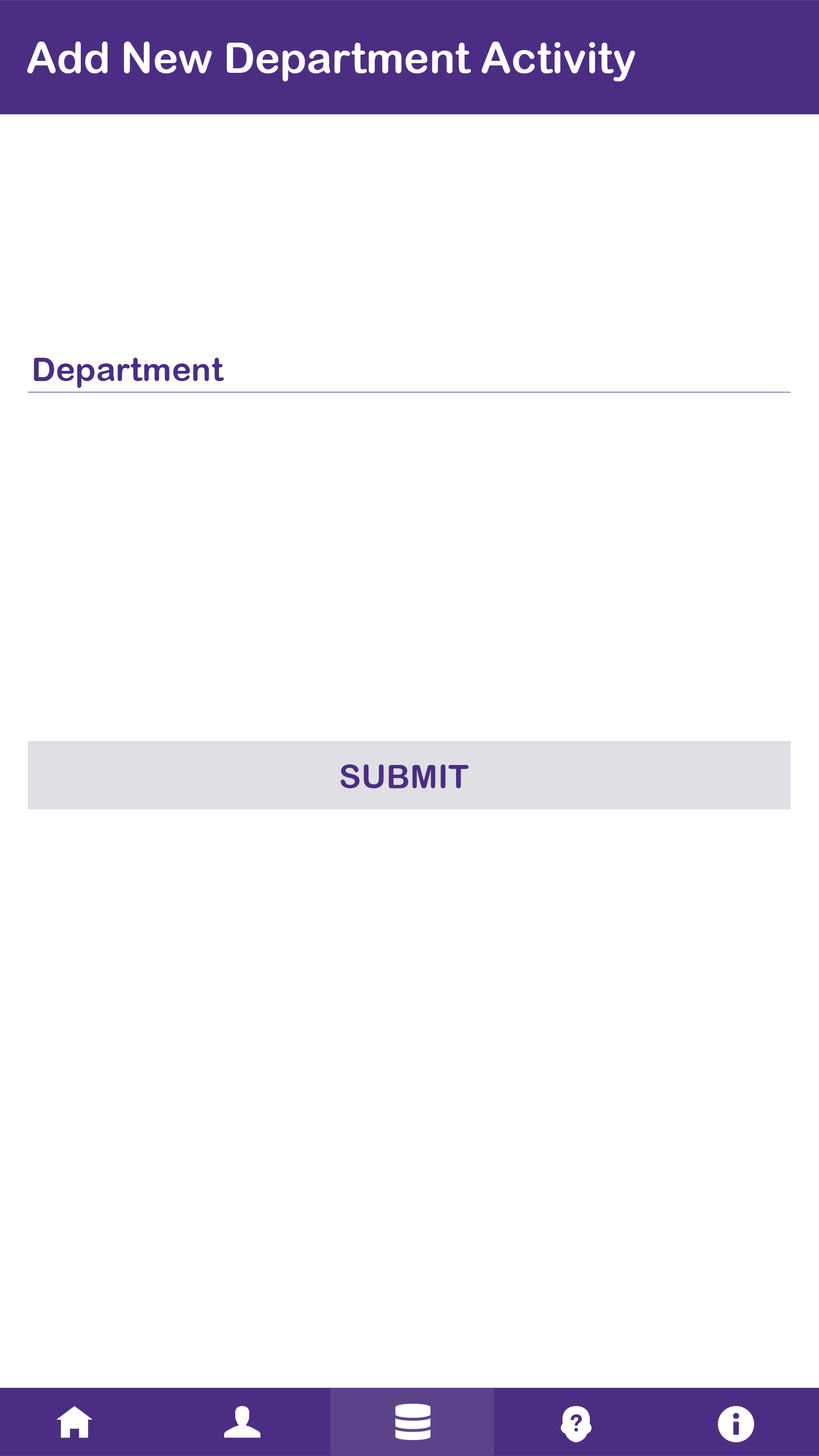
<style>
.page{position:relative;width:819px;height:1456px;background:#ffffff}
.page>*{position:absolute;margin:0}
.t1{font:42.7px "ArialRoundedMTBold";color:#ffffff}
.t2{font:33.2px "ArialRoundedMTBold";color:#4b2e83}
</style>
<div class="page">
<p class="t1" style="left:27px;top:42px;width:608px;height:39px">Add New Department Activity</p>
<p class="t2" style="left:34px;top:358px;width:190px;height:30px">Department</p>
<p class="t2" style="left:341px;top:764px;width:128px;height:24px">SUBMIT</p>
</div>
